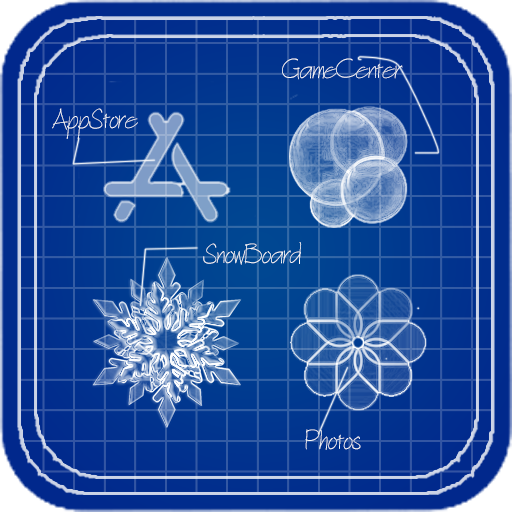
<style>
.page{position:relative;width:512px;height:512px}
.page>*{position:absolute;margin:0}
.t1{font:29.5px "Architext";color:#f9fafb}
</style>
<div class="page">
<p class="t1" style="left:282px;top:58px;width:121px;height:22px">GameCenter</p>
<p class="t1" style="left:52px;top:108px;width:86px;height:31px">AppStore</p>
<p class="t1" style="left:203px;top:242px;width:99px;height:23px">SnowBoard</p>
<p class="t1" style="left:305px;top:429px;width:56px;height:21px">Photos</p>
</div>
